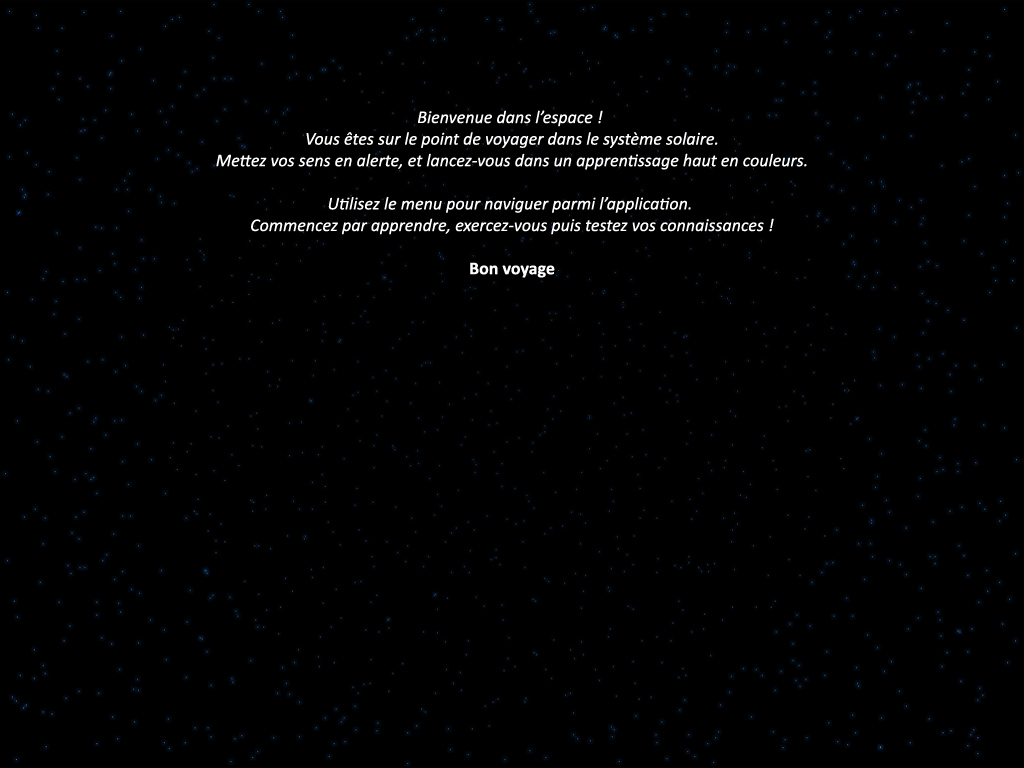
<style>
.page{position:relative;width:1024px;height:768px;background:#000000}
.page>*{position:absolute;margin:0}
.t1{font:18px "Calibri-Italic";color:#ffffff}
.t2{font:18px "Calibri-Bold";color:#ffffff}
</style>
<div class="page">
<p class="t1" style="left:216px;top:110px;width:591px;height:168px;text-align:center">Bienvenue dans l’espace ! <br>Vous êtes sur le point de voyager dans le système solaire.<br>Mettez vos sens en alerte, et lancez-vous dans un apprentissage haut en couleurs.<br><br>Utilisez le menu pour naviguer parmi l’application. <br>Commencez par apprendre, exercez-vous puis testez vos connaissances !<br><br><span class="t2">Bon voyage</span></p>
</div>
